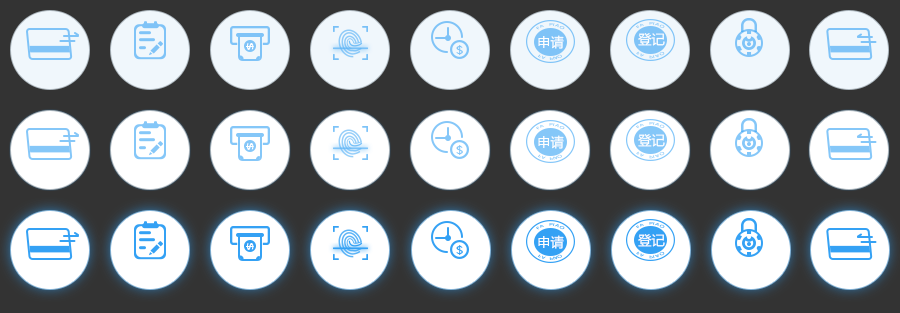
<style>
.page{position:relative;width:900px;height:313px;background:#333333}
.page>*{position:absolute;margin:0}
.t1{font:13.6px "MicrosoftYaHei";color:#ffffff}
.t2{font:13.3px "MicrosoftYaHei";color:#ffffff}
.t3{font:8px "MicrosoftYaHei-Bold";color:#ffffff;text-transform:uppercase;scale:1.74 1}
.t4{font:11.1px "MicrosoftYaHei";color:#7fc3f7;text-transform:uppercase;scale:1.26 1}
.t5{font:11.1px "MicrosoftYaHei";color:#85c7f8;text-transform:uppercase;scale:1.26 1}
.t6{font:11.1px "MicrosoftYaHei";color:#34a1f4;text-transform:uppercase;scale:1.26 1}
</style>
<div class="page">
<p class="t1" style="left:538px;top:35px;width:26px;height:14px">申请</p>
<p class="t2" style="left:638px;top:33px;width:27px;height:13px">登记</p>
<p class="t3" style="left:246px;top:43px;width:8px;height:7px;rotate:90deg">$</p>
<p class="t4" style="left:456px;top:45px;width:7px;height:10px">$</p>
<p class="t1" style="left:538px;top:135px;width:26px;height:14px">申请</p>
<p class="t2" style="left:638px;top:134px;width:27px;height:13px">登记</p>
<p class="t3" style="left:246px;top:143px;width:8px;height:7px;rotate:90deg">$</p>
<p class="t5" style="left:456px;top:145px;width:7px;height:10px">$</p>
<p class="t3" style="left:246px;top:243px;width:8px;height:7px;rotate:90deg">$</p>
<p class="t6" style="left:456px;top:245px;width:7px;height:10px">$</p>
<p class="t1" style="left:538px;top:235px;width:26px;height:14px">申请</p>
<p class="t2" style="left:638px;top:234px;width:27px;height:13px">登记</p>
</div>
